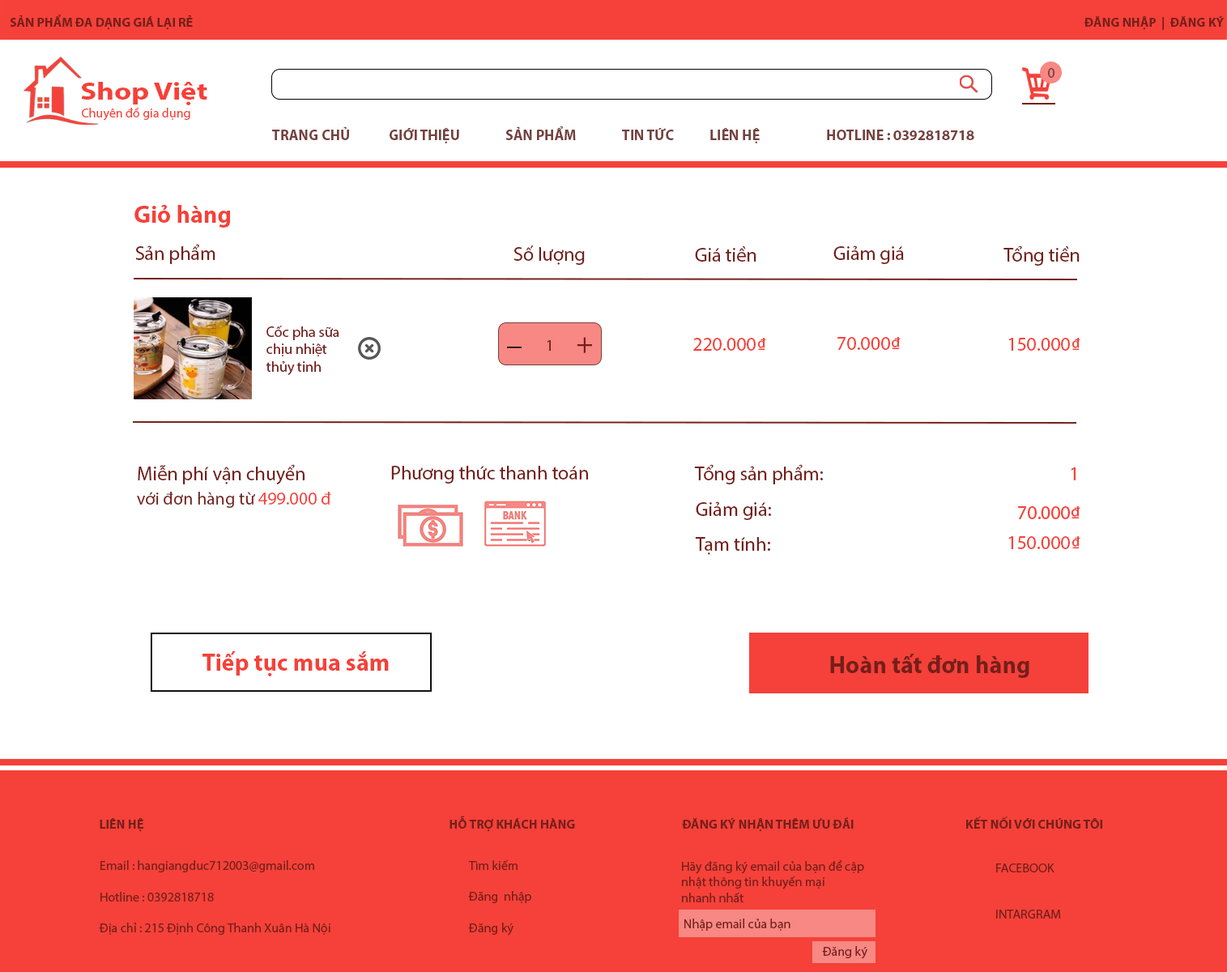
<style>
.page{position:relative;width:1227px;height:972px;background:#ffffff}
.page>*{position:absolute;margin:0}
.t1{font:13px "MyriadPro-Bold";color:#751f1b}
.t2{font:14.6px "MyriadPro-Regular";color:#75413e}
.t3{font:25.2px "MyriadPro-Bold";color:#f54139;scale:1.19 1}
.t4{font:13px "MyriadPro-Regular";color:#f54139}
.t5{font:13px "MyriadPro-Regular";color:#ffffff}
.t6{font:14.6px "MyriadPro-Bold";color:#75413e}
.t7{font:24.3px "MyriadPro-Bold";color:#f54139}
.t8{font:19.4px "MyriadPro-Regular";color:#751f1b}
.t9{font:14.6px "MyriadPro-Regular";color:#751f1b}
.t10{font:16.2px "MyriadPro-Regular";color:#751f1b}
.t11{font:29.2px "MyriadPro-Regular";color:#751f1b}
.t12{font:19.4px "MyriadPro-Regular";color:#f54139}
.t13{font:29.2px "MyriadPro-Regular";color:#000000}
.t14{font:19.4px/24.3px "MyriadPro-Regular";color:#751f1b}
.t15{font:17.8px/24.3px "MyriadPro-Regular";color:#751f1b}
.t16{font:17.8px/24.3px "MyriadPro-Regular";color:#f54139}
.t17{font:24.3px "MyriadPro-Bold";color:#751f1b}
.t18{font:13px "MyriadPro-Bold";color:#751f1b;text-transform:uppercase}
.t19{font:13px "MyriadPro-Regular";color:#751f1b}
</style>
<div class="page">
<p class="t1" style="left:10px;top:15px;width:183px;height:15px">SẢN PHẨM ĐA DẠNG GIÁ LẠI RẺ</p>
<p class="t1" style="left:1084px;top:16px;width:140px;height:14px">ĐĂNG NHẬP  |  ĐĂNG KÝ</p>
<p class="t2" style="left:1048px;top:68px;width:6px;height:10px">0</p>
<p class="t3" style="left:81px;top:82px;width:126px;height:23px">Shop Việt</p>
<p class="t4" style="left:76px;top:107px;width:114px;height:14px"><span class="t5">s</span>Chuyên đồ gia dụng</p>
<p class="t6" style="left:272px;top:126px;width:702px;height:17px">TRANG CHỦ   GIỚI THIỆU  SẢN PHẨM   TIN TỨC  LIÊN HỆ   HOTLINE : 0392818718</p>
<p class="t7" style="left:134px;top:204px;width:96px;height:24px">Giỏ hàng</p>
<p class="t8" style="left:135px;top:244px;width:80px;height:20px">Sản phẩm</p>
<p class="t8" style="left:513px;top:245px;width:72px;height:20px">Số lượng</p>
<p class="t8" style="left:833px;top:245px;width:71px;height:19px">Giảm giá</p>
<p class="t8" style="left:1003px;top:245px;width:77px;height:21px">Tổng tiền</p>
<p class="t8" style="left:695px;top:246px;width:61px;height:16px">Giá tiền</p>
<p class="t9" style="left:266px;top:326px;width:73px;height:49px">Cốc pha sữa <br>chịu nhiệt <br>thủy tinh</p>
<p class="t10" style="left:547px;top:340px;width:4px;height:11px">1</p>
<p class="t11" style="left:577px;top:337px;width:15px;height:16px">+</p>
<p class="t12" style="left:693px;top:338px;width:73px;height:13px">220.000₫</p>
<p class="t12" style="left:837px;top:337px;width:64px;height:13px">70.000₫</p>
<p class="t12" style="left:1008px;top:338px;width:72px;height:13px">150.000₫</p>
<p class="t13" style="left:507px;top:347px;width:15px;height:1px">_</p>
<p class="t14" style="left:137px;top:464px;width:194px;height:44px">Miễn phí vận chuyển <br><span class="t15">với đơn hàng từ </span><span class="t16">499.000 đ</span></p>
<p class="t8" style="left:391px;top:466px;width:197px;height:17px">Phương thức thanh toán</p>
<p class="t8" style="left:694px;top:464px;width:129px;height:20px">Tổng sản phẩm:</p>
<p class="t12" style="left:1071px;top:467px;width:5px;height:13px">1</p>
<p class="t8" style="left:696px;top:501px;width:75px;height:19px">Giảm giá:</p>
<p class="t12" style="left:1018px;top:506px;width:62px;height:13px">70.000₫</p>
<p class="t8" style="left:695px;top:537px;width:75px;height:18px">Tạm tính:</p>
<p class="t12" style="left:1008px;top:536px;width:72px;height:13px">150.000₫</p>
<p class="t7" style="left:202px;top:650px;width:187px;height:26px">Tiếp tục mua sắm</p>
<p class="t17" style="left:830px;top:654px;width:199px;height:24px">Hoàn tất đơn hàng</p>
<p class="t18" style="left:100px;top:816px;width:1002px;height:16px"><span class="t1">LIÊN HỆ             HỖ TRỢ KHÁCH HÀNG     </span>Đăng ký nhận thêm ưu đãi             Kết nối với chúng tôi</p>
<p class="t19" style="left:99px;top:860px;width:231px;height:75px">Email : hangiangduc712003@gmail.com<br><br>Hotline : 0392818718<br><br>Địa chỉ : 215 Định Công Thanh Xuân Hà Nội</p>
<p class="t19" style="left:468px;top:859px;width:63px;height:76px">Tìm kiếm<br><br>Đăng  nhập<br><br>Đăng ký</p>
<p class="t19" style="left:682px;top:860px;width:182px;height:42px">Hãy đăng ký email của bạn để cập <br>nhật thông tin khuyến mại<br>nhanh nhất</p>
<p class="t19" style="left:996px;top:863px;width:65px;height:55px">FACEBOOK<br><br><br>INTARGRAM</p>
<p class="t19" style="left:684px;top:918px;width:106px;height:13px">Nhập email của bạn</p>
<p class="t19" style="left:822px;top:946px;width:45px;height:13px">Đăng ký</p>
</div>
